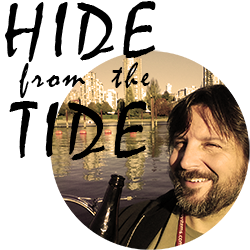
<style>
.page{position:relative;width:250px;height:250px;background:#ffffff}
.page>*{position:absolute;margin:0}
.t1{font:36px/30px "Mistral";letter-spacing:0.088em;color:#000000}
.t2{font:80px/30px "Mistral";letter-spacing:0.088em;color:#000000}
.t3{font:80px/70px "Mistral";letter-spacing:0.088em;color:#000000}
</style>
<div class="page">
<p class="t1" style="left:5px;top:1px;width:151px;height:160px;text-align:center"><span class="t2">HIDE<br></span> from  the<br><span class="t3">TIDE</span></p>
</div>
